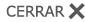
<style>
.page{position:relative;width:85px;height:22px;background:#ffffff}
.page>*{position:absolute;margin:0}
.t1{font:14.7px "Verdana";color:#585858;scale:0.97 1}
</style>
<div class="page">
<p class="t1" style="left:6px;top:5px;width:59px;height:12px">CERRAR</p>
</div>
